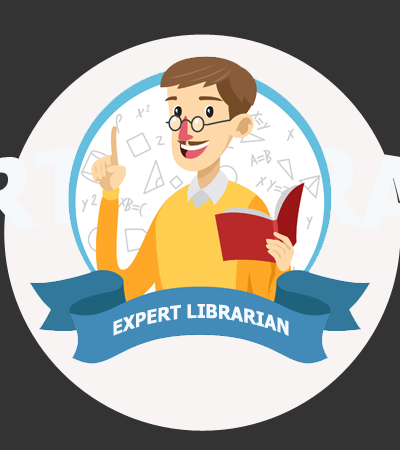
<style>
.page{position:relative;width:400px;height:450px;background:#333333}
.page>*{position:absolute;margin:0}
.t1{font:19.1px "Tahoma-Bold";color:#f5f9fb;scale:0.92 1}
</style>
<div class="page">
<p class="t1" style="left:113px;top:304px;width:176px;height:32px">EXPERT LIBRARIAN</p>
</div>
